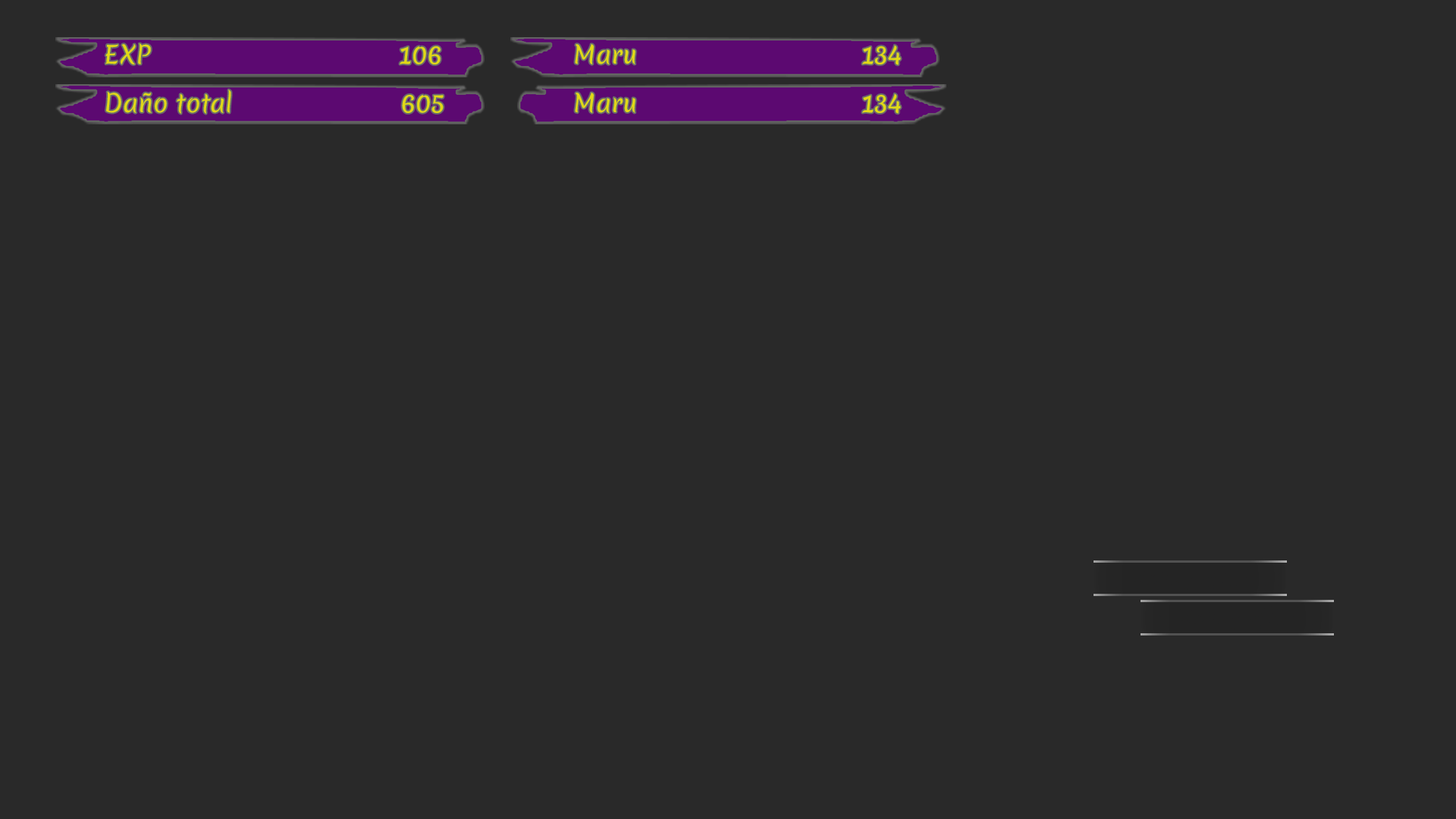
<style>
.page{position:relative;width:1456px;height:819px;background:#292929}
.page>*{position:absolute;margin:0}
.t1{font:24.3px "Merienda-Regular_0_wt";color:#e0d916}
</style>
<div class="page">
<p class="t1" style="left:105px;top:43px;width:336px;height:21px">EXP                               106</p>
<p class="t1" style="left:575px;top:44px;width:326px;height:21px">Maru                            134</p>
<p class="t1" style="left:106px;top:89px;width:338px;height:25px">Daño total                     605</p>
<p class="t1" style="left:575px;top:93px;width:326px;height:21px">Maru                            134</p>
</div>
